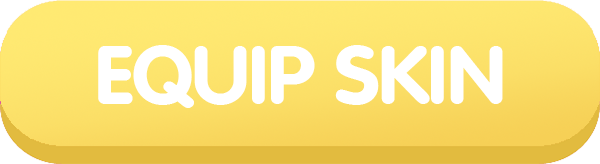
<style>
.page{position:relative;width:600px;height:164px}
.page>*{position:absolute;margin:0}
.t1{font:82.7px "Vag_Rounded-BoldCYRusbyme";color:#ffffff;scale:1.04 1}
</style>
<div class="page">
<p class="t1" style="left:98px;top:45px;width:405px;height:63px">EQUIP SKIN</p>
</div>
